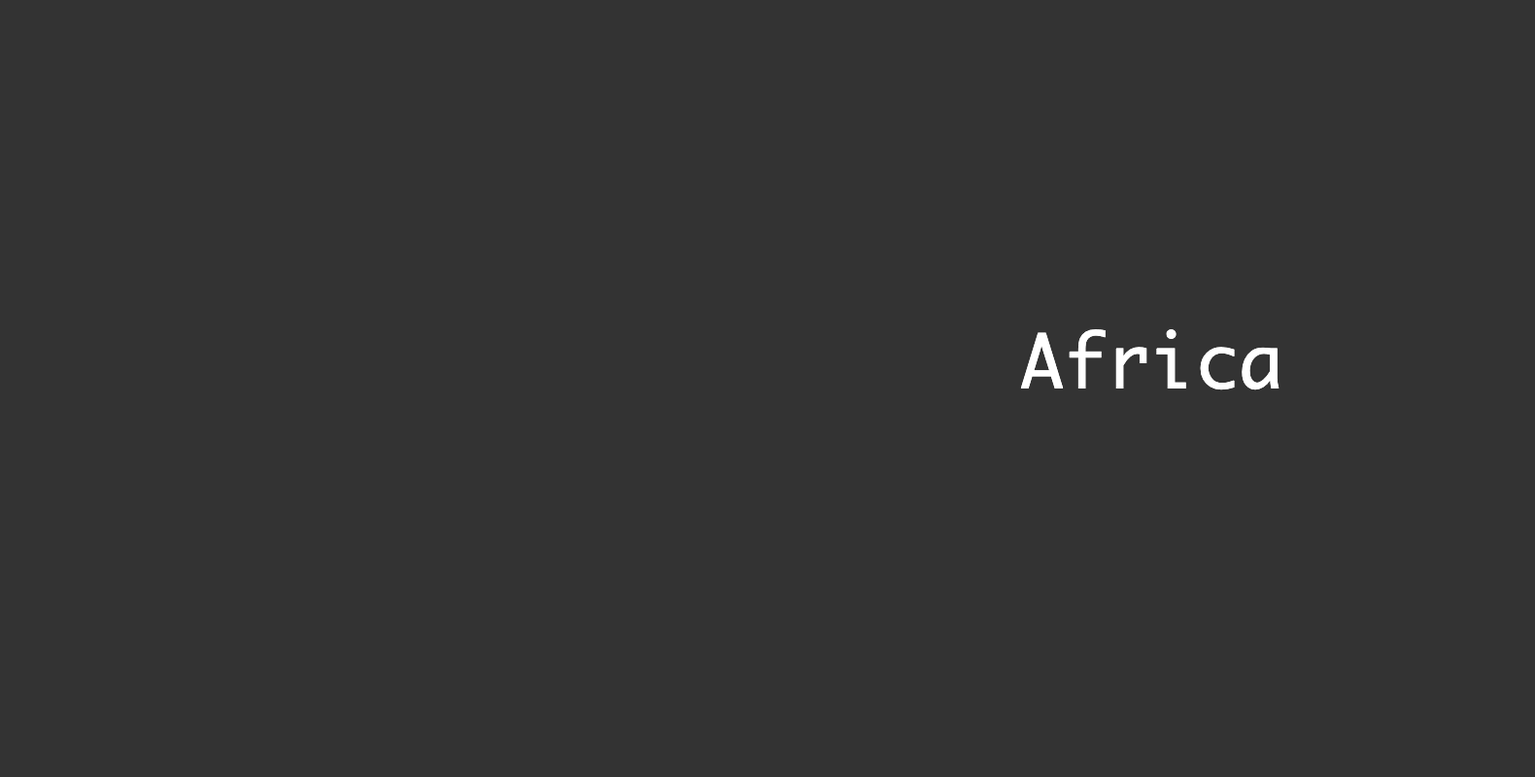
<style>
.page{position:relative;width:1535px;height:777px;background:#333333}
.page>*{position:absolute;margin:0}
.t1{font:72.8px "Ayuthaya";color:#ffffff}
</style>
<div class="page">
<p class="t1" style="left:1020px;top:329px;width:259px;height:61px">Africa</p>
</div>
